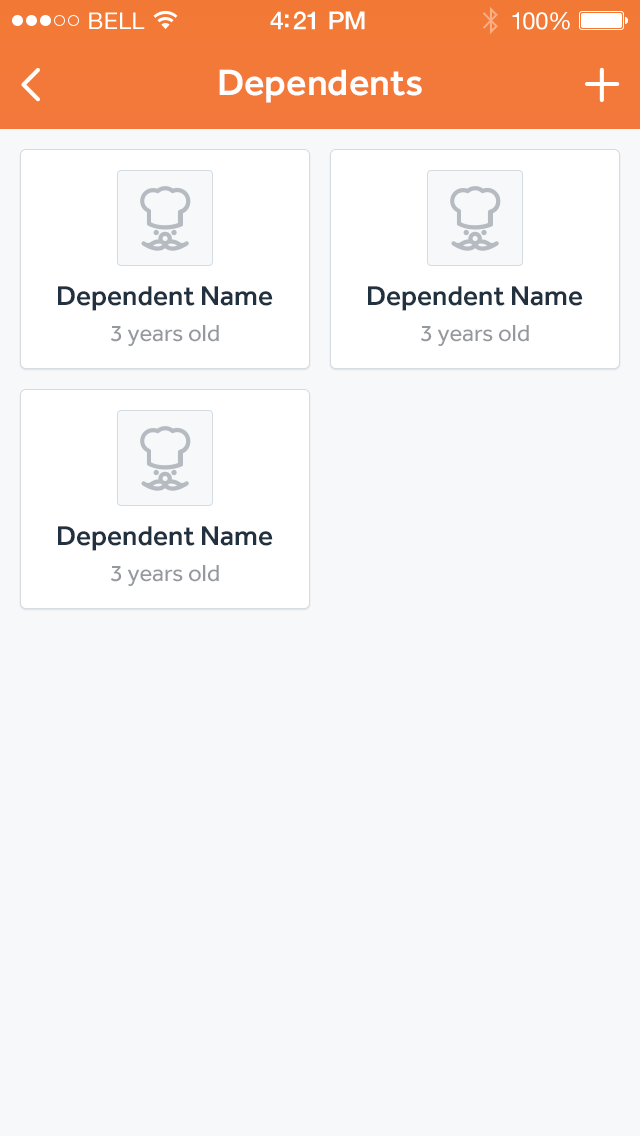
<style>
.page{position:relative;width:640px;height:1136px;background:#f6f8fa}
.page>*{position:absolute;margin:0}
.t1{font:23px "HelveticaNeue";letter-spacing:0.02em;color:#ffffff}
.t2{font:25px "HelveticaNeue-Medium";letter-spacing:-0.02em;color:#ffffff}
.t3{font:24px "HelveticaNeue";letter-spacing:-0.02em;color:#ffffff}
.t4{font:38px "Effra-Medium";color:#ffffff}
.t5{font:28px "Effra-Medium";color:#22313f}
.t6{font:24px "Effra-Regular";color:#95999e}
</style>
<div class="page">
<p class="t1" style="left:89px;top:12px;width:56px;height:17px">BELL</p>
<p class="t2" style="left:270px;top:11px;width:95px;height:19px">4:21 PM</p>
<p class="t3" style="left:512px;top:12px;width:58px;height:18px">100%</p>
<p class="t4" style="left:219px;top:69px;width:203px;height:34px">Dependents</p>
<p class="t5" style="left:58px;top:286px;width:215px;height:25px">Dependent Name</p>
<p class="t5" style="left:368px;top:286px;width:215px;height:25px">Dependent Name</p>
<p class="t6" style="left:111px;top:325px;width:108px;height:21px">3 years old</p>
<p class="t6" style="left:421px;top:325px;width:108px;height:21px">3 years old</p>
<p class="t5" style="left:58px;top:526px;width:215px;height:25px">Dependent Name</p>
<p class="t6" style="left:111px;top:565px;width:108px;height:21px">3 years old</p>
</div>
